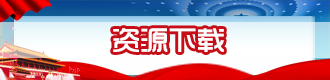
<style>
.page{position:relative;width:330px;height:80px}
.page>*{position:absolute;margin:0}
.t1{font:28.2px "ShiShangZhongHei";color:#ffffff}
</style>
<div class="page">
<p class="t1" style="left:113px;top:28px;width:111px;height:24px">资源下载</p>
</div>
